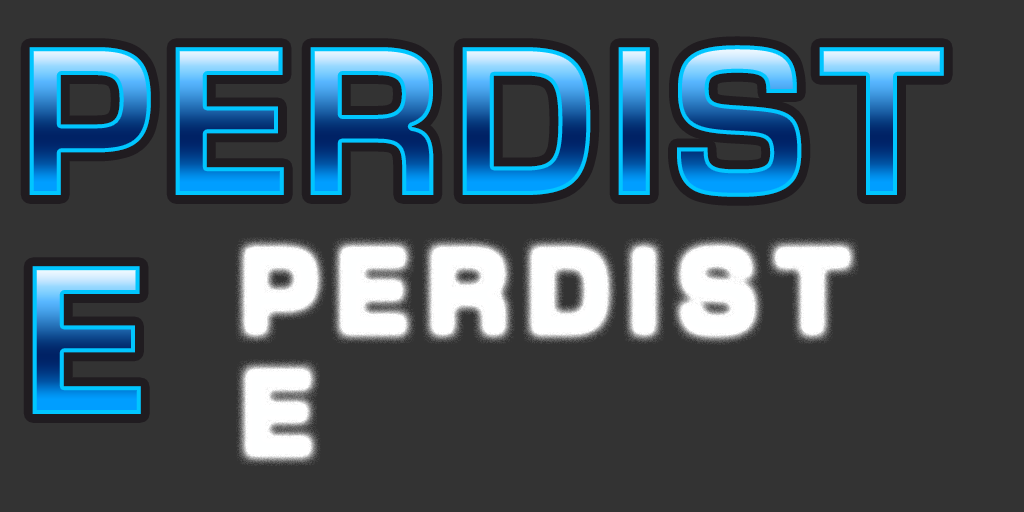
<style>
.page{position:relative;width:1024px;height:512px;background:#333333}
.page>*{position:absolute;margin:0}
.t1{font:205.1px "NewScience-Bold";letter-spacing:0.04em;text-transform:uppercase;scale:0.94 1}
.t2{font:114.3px "NewScience-Bold";letter-spacing:0.18em;color:#feffff;text-transform:uppercase;scale:0.94 1}
.t3{font:114.3px "NewScience-Bold";letter-spacing:0.04em;color:#feffff;text-transform:uppercase;scale:0.94 1}
</style>
<div class="page">
<p class="t1" style="left:29px;top:45px;width:915px;height:152px">perdist</p>
<p class="t2" style="left:247px;top:248px;width:601px;height:86px">perdist</p>
<p class="t1" style="left:32px;top:266px;width:109px;height:148px">E</p>
<p class="t3" style="left:248px;top:371px;width:61px;height:83px">E</p>
</div>
